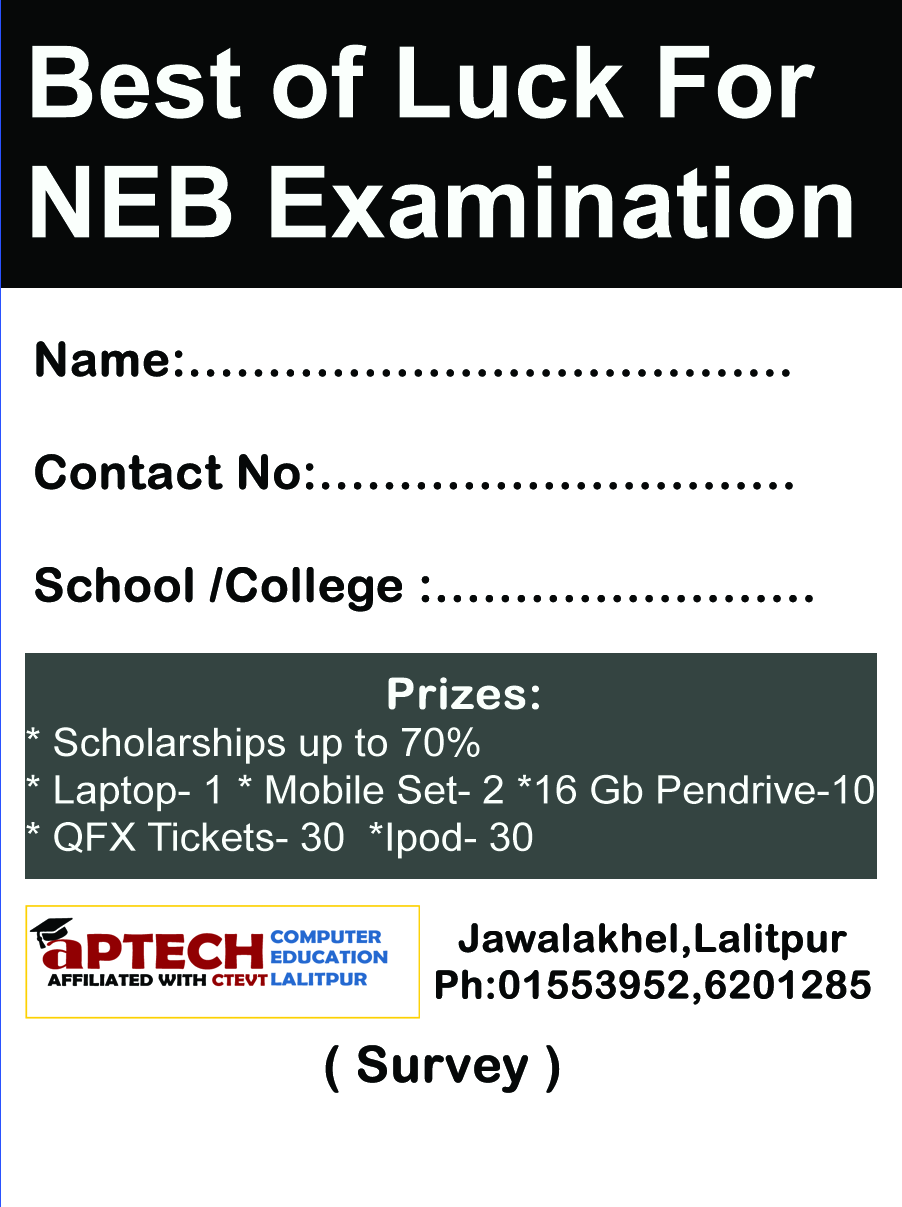
<style>
.page{position:relative;width:902px;height:1207px;background:#ffffff}
.page>*{position:absolute;margin:0}
.t1{font:100px "Arial-BoldMT";color:#fafffc}
.t2{font:47px "ArialRoundedMTBold";color:#060808;font-weight:bold}
.t3{font:39.4px "ArialMT";color:#fafffc;scale:1.04 1}
.t4{font:43.3px "ArialRoundedMTBold";color:#fafffc;font-weight:bold;scale:1.04 1}
.t5{font:38.8px "ArialRoundedMTBold";color:#060808;font-weight:bold}
.t6{font:51.3px "ArialRoundedMTBold";color:#060808;font-weight:bold}
.t7{font:50px "ArialRoundedMTBold";color:#060808;font-weight:bold}
</style>
<div class="page">
<p class="t1" style="left:32px;top:44px;width:820px;height:195px">Best of Luck For NEB Examination</p>
<p class="t2" style="left:35px;top:341px;width:778px;height:271px">Name:......................................<br><br>Contact No:..............................<br><br>School /College :........................</p>
<p class="t3" style="left:26px;top:677px;width:848px;height:182px;text-align:center"><span class="t4">Prizes: <br></span>* Scholarships up to 70%<br>* Laptop- 1  * Mobile Set- 2 *16 Gb Pendrive-10 <br>* QFX Tickets- 30  *Ipod- 30</p>
<p class="t5" style="left:436px;top:923px;width:435px;height:82px;text-align:center"><span class="t6"><br></span>Jawalakhel,Lalitpur<br>Ph:01553952,6201285</p>
<p class="t7" style="left:325px;top:1045px;width:235px;height:48px">( Survey )</p>
</div>
